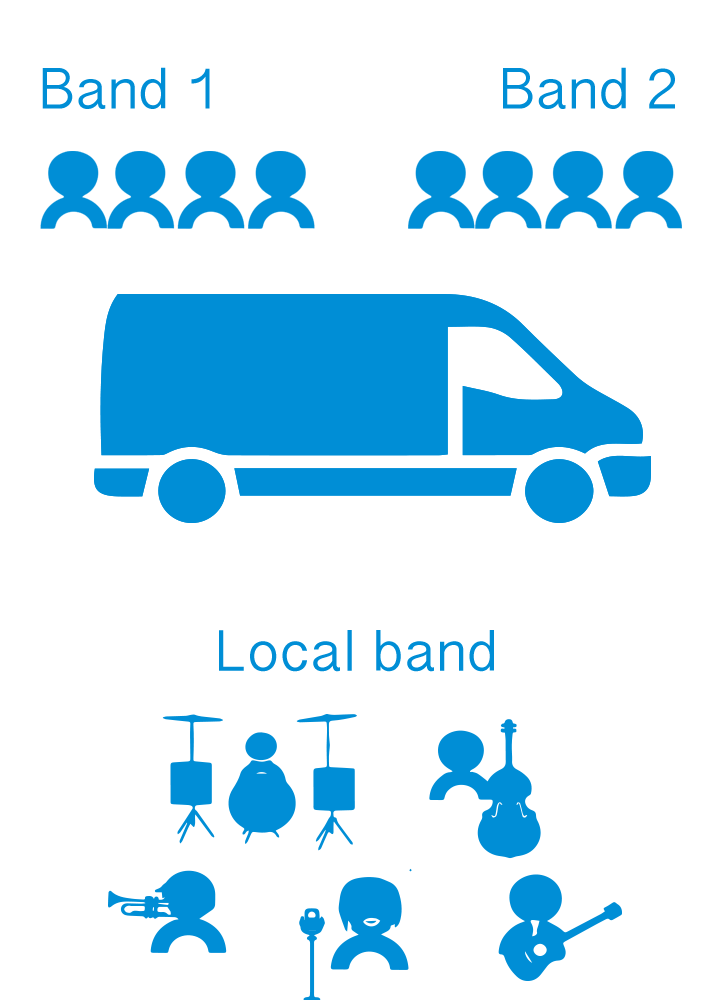
<style>
.page{position:relative;width:707px;height:1000px;background:#ffffff}
.page>*{position:absolute;margin:0}
.t1{font:58.6px "LaoSangamMN";color:#008ed6}
</style>
<div class="page">
<p class="t1" style="left:42px;top:67px;width:633px;height:42px">Band 1                Band 2</p>
<p class="t1" style="left:219px;top:630px;width:275px;height:42px">Local band</p>
</div>
